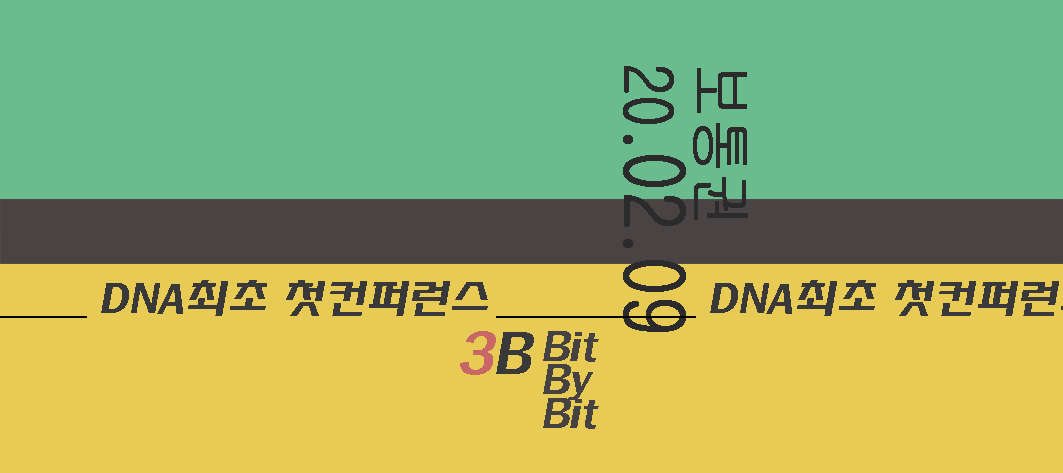
<style>
.page{position:relative;width:1063px;height:473px;background:#6abb8e}
.page>*{position:absolute;margin:0}
.t1{font:66.7px/58.3px "New-Gulim";color:#2c2b2b;font-weight:bold;scale:0.8 1}
.t2{font:83.3px/58.3px "New-Gulim";color:#2c2b2b;font-weight:bold;scale:0.8 1}
.t3{font:41.7px "HYsupB";color:#3a3939;font-style:italic}
.t4{font:58.3px "HYsupB";color:#c96766;font-style:italic}
.t5{font:58.3px "HYsupB";color:#3a3939;font-style:italic}
.t6{font:41.7px/33.3px "HYsupB";color:#464242;font-style:italic}
</style>
<div class="page">
<p class="t1" style="left:623px;top:66px;width:125px;height:266px;rotate:90deg">보통권<br>20<span class="t2">.02.09</span></p>
<p class="t3" style="left:101px;top:280px;width:387px;height:36px">DNA최초 첫컨퍼런스</p>
<p class="t4" style="left:460px;top:331px;width:74px;height:44px">3<span class="t5">B</span></p>
<p class="t6" style="left:543px;top:331px;width:56px;height:98px">Bit<br>By<br>Bit</p>
</div>
